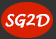
<style>
.page{position:relative;width:56px;height:39px;background:#da2203}
.page>*{position:absolute;margin:0}
.t1{font:15px "LucidaHandwriting-Italic";color:#ffffff;font-weight:bold}
</style>
<div class="page">
<p class="t1" style="left:5px;top:14px;width:45px;height:14px">SG2D</p>
</div>
